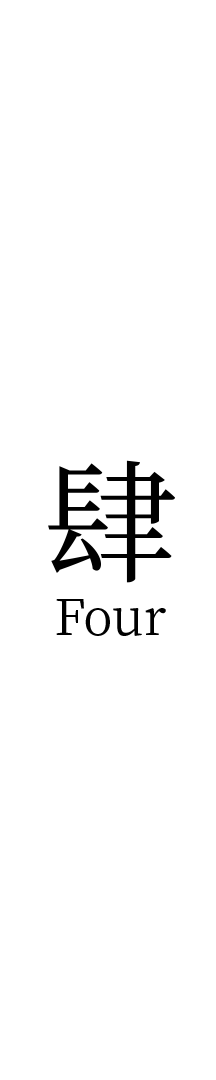
<style>
.page{position:relative;width:216px;height:1080px;background:#ffffff}
.page>*{position:absolute;margin:0}
.t1{font:133.3px "NotoSerifCJKsc-Regular";color:#000000}
.t2{font:50px "NotoSerifCJKsc-Regular";color:#000000}
</style>
<div class="page">
<p class="t1" style="left:48px;top:460px;width:127px;height:123px">肆</p>
<p class="t2" style="left:56px;top:599px;width:110px;height:37px">Four</p>
</div>
